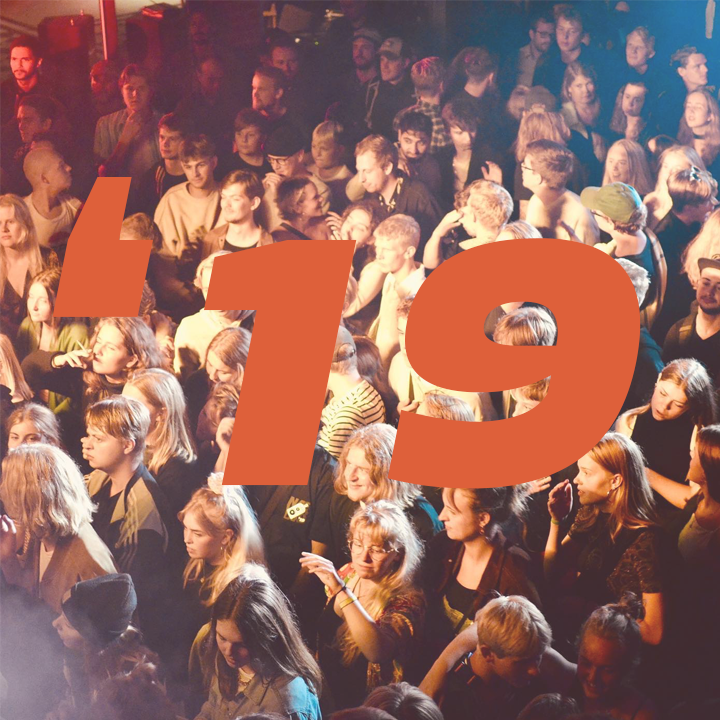
<style>
.page{position:relative;width:720px;height:720px}
.page>*{position:absolute;margin:0}
.t1{font:350px "Majoris-Italic";letter-spacing:0.1em;color:#de603a;text-transform:uppercase}
</style>
<div class="page">
<p class="t1" style="left:52px;top:177px;width:589px;height:312px">‘19</p>
</div>
